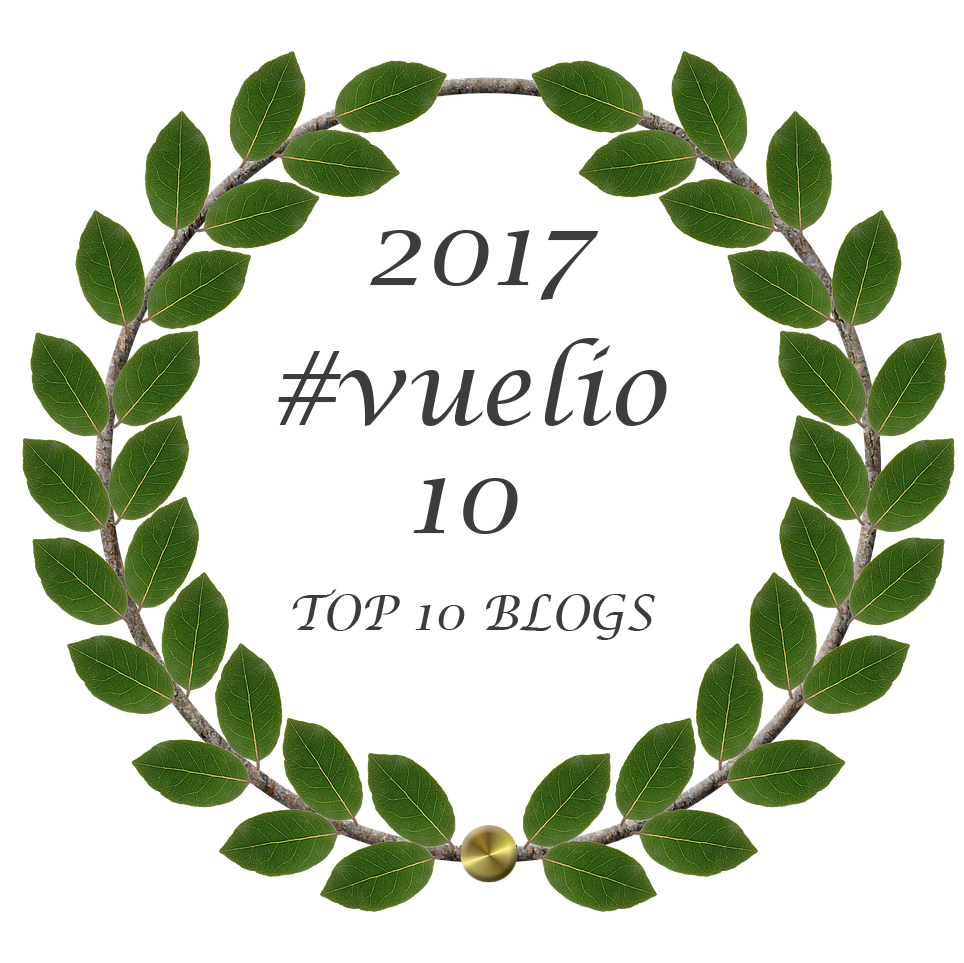
<style>
.page{position:relative;width:964px;height:963px;background:#ffffff}
.page>*{position:absolute;margin:0}
.t1{font:102px "LucidaCalligraphy-Italic";color:#3d3c3b}
.t2{font:48px "LucidaCalligraphy-Italic";color:#3d3c3b}
</style>
<div class="page">
<p class="t1" style="left:370px;top:230px;width:229px;height:70px">2017</p>
<p class="t1" style="left:278px;top:338px;width:389px;height:88px">#vuelio</p>
<p class="t1" style="left:413px;top:478px;width:105px;height:56px">10</p>
<p class="t2" style="left:292px;top:589px;width:363px;height:51px">TOP 10 BLOGS</p>
</div>
